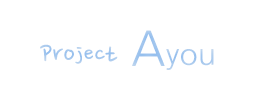
<style>
.page{position:relative;width:260px;height:100px;background:#ffffff}
.page>*{position:absolute;margin:0}
.t1{font:30px "NanumPen";color:#a1c5ee}
.t2{font:48px "NanumGothic";color:#a1c5ee}
.t3{font:30px "NanumGothic";color:#a1c5ee}
</style>
<div class="page">
<p class="t1" style="left:40px;top:30px;width:174px;height:40px">Project <span class="t2">A</span><span class="t3">you</span></p>
</div>
